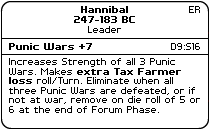
<style>
.page{position:relative;width:210px;height:130px;background:#ffffff}
.page>*{position:absolute;margin:0}
.t1{font:8px "PFTempestaSeven-Bold";color:#000000}
.t2{font:8px "PFTempestaSeven";color:#000000}
.t3{font:8px "PFTempestaSeven";color:#010101}
</style>
<div class="page">
<p class="t1" style="left:74px;top:6px;width:61px;height:17px;text-align:center">Hannibal<br>247-183 BC</p>
<p class="t2" style="left:189px;top:6px;width:11px;height:7px">ER</p>
<p class="t2" style="left:88px;top:26px;width:33px;height:7px">Leader</p>
<p class="t1" style="left:9px;top:43px;width:83px;height:7px">Punic Wars +7</p>
<p class="t3" style="left:171px;top:43px;width:29px;height:7px">D9:S16</p>
<p class="t2" style="left:9px;top:58px;width:191px;height:55px">Increases Strength of all 3 Punic<br>Wars. Makes <span class="t1">extra Tax Farmer<br>loss </span>roll/Turn. Eliminate when all<br>three Punic Wars are defeated, or if<br>not at war, remove on die roll of 5 or<br>6 at the end of Forum Phase.</p>
</div>
